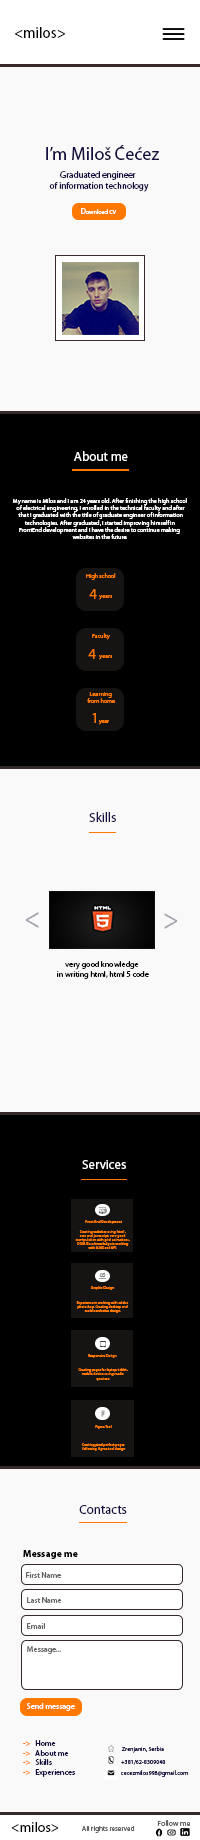
<style>
.page{position:relative;width:200px;height:1840px;background:#f9f9f9}
.page>*{position:absolute;margin:0}
.t1{font:15px "MyriadPro-Regular";color:#000000}
.t2{font:18px "MyriadPro-Regular";color:#130f40}
.t3{font:9px "MyriadPro-Regular";color:#130f40}
.t4{font:6px "MyriadPro-Regular";color:#ffffff}
.t5{font:8px "MyriadPro-Regular";color:#ffffff}
.t6{font:13px "MyriadPro-Regular";color:#ffffff}
.t7{font:6px "MyriadPro-Regular";color:#ff7800}
.t8{font:14px "MyriadPro-Regular";color:#ff7800}
.t9{font:13px "MyriadPro-Regular";color:#130f40}
.t10{font:30.4px "MyriadPro-Regular";color:#a2a1ac;scale:0.88 1}
.t11{font:29.4px "MyriadPro-Regular";color:#a2a1ac;scale:0.91 1}
.t12{font:8px "MyriadPro-Regular";color:#000000}
.t13{font:3.3px "MyriadPro-Regular";color:#ff7800;scale:1.1 1}
.t14{font:3.4px "MyriadPro-Regular";color:#ff7800;scale:1.06 1}
.t15{font:3.5px "MyriadPro-Regular";color:#ff7800}
.t16{font:3.5px "MyriadPro-Regular";color:#ff7800;scale:1.04 1}
.t17{font:10px "MyriadPro-Bold";color:#000000}
.t18{font:8px "MyriadPro-Regular";color:#666666}
.t19{font:8px "MyriadPro-Regular";color:#130f40}
.t20{font:8px "MyriadPro-Regular";color:#ff7800}
.t21{font:6px "MyriadPro-Regular";color:#130f40}
.t22{font:14px "MyriadPro-Regular";color:#000000}
.t23{font:7px "MyriadPro-Regular";color:#666666}
.t24{font:7.3px "MyriadPro-Regular";color:#666666;scale:1.04 1}
</style>
<div class="page">
<p class="t1" style="left:15px;top:27px;width:50px;height:11px">&lt;milos&gt;</p>
<p class="t2" style="left:46px;top:145px;width:113px;height:15px">I’m Miloš Ćećez</p>
<p class="t3" style="left:49px;top:171px;width:100px;height:21px;text-align:center">Graduated engineer <br>of information technology</p>
<p class="t4" style="left:81px;top:208px;width:35px;height:6px"><span class="t5">D</span>ownload CV</p>
<p class="t6" style="left:74px;top:451px;width:54px;height:10px">About me</p>
<p class="t4" style="left:12px;top:498px;width:175px;height:41px;text-align:center">My name is Milos and I am 24 years old. After finishing the high school<br> of electrical engineering, I enrolled in the technical faculty and after<br> that I graduated with the title of graduate engineer of information<br> technologies. After graduated, I started improving himself in <br>FrontEnd development and I have the desire to continue making <br>websites in the future.</p>
<p class="t7" style="left:86px;top:573px;width:30px;height:7px">High school</p>
<p class="t8" style="left:89px;top:589px;width:8px;height:10px">4</p>
<p class="t7" style="left:99px;top:595px;width:14px;height:5px">years</p>
<p class="t7" style="left:92px;top:633px;width:18px;height:7px">Faculty</p>
<p class="t8" style="left:88px;top:649px;width:8px;height:10px">4</p>
<p class="t7" style="left:99px;top:655px;width:14px;height:5px">years</p>
<p class="t7" style="left:87px;top:692px;width:29px;height:11px">Learning <br> from home</p>
<p class="t8" style="left:92px;top:713px;width:4px;height:10px">1</p>
<p class="t7" style="left:99px;top:720px;width:10px;height:5px">year</p>
<p class="t9" style="left:89px;top:812px;width:27px;height:10px">Skills</p>
<p class="t10" style="left:26px;top:912px;width:13px;height:16px">&lt;</p>
<p class="t11" style="left:164px;top:913px;width:13px;height:16px">&gt;</p>
<p class="t12" style="left:57px;top:961px;width:92px;height:18px;text-align:center">very good knowledge<br> in writing html, html 5 code</p>
<p class="t6" style="left:82px;top:1160px;width:44px;height:9px">Services</p>
<p class="t13" style="left:75px;top:1230px;width:55px;height:19px">Creating websites using  html ,<br>scss and  javascript, very good<br>manipulation with grid, animations,<br>DOM. Base knowledge in working<br>with AJAX and API.</p>
<p class="t13" style="left:85px;top:1220px;width:37px;height:4px">Front-End Development</p>
<p class="t14" style="left:90px;top:1286px;width:25px;height:4px">Graphic Design</p>
<p class="t14" style="left:76px;top:1301px;width:53px;height:12px;text-align:center">Experience in working with adobe <br>photoshop. Creating desktop and <br>mobile websites design.</p>
<p class="t15" style="left:88px;top:1354px;width:29px;height:4px">Responsive Design</p>
<p class="t15" style="left:78px;top:1368px;width:50px;height:13px;text-align:center">Creating pages for laptop, tablet,<br> mobile devices using media <br>queries.s</p>
<p class="t16" style="left:95px;top:1425px;width:17px;height:4px">Figma Tool</p>
<p class="t16" style="left:81px;top:1443px;width:45px;height:8px">Creating pixel perfect pages<br> following  figma tool design</p>
<p class="t9" style="left:79px;top:1505px;width:48px;height:9px">Contacts</p>
<p class="t17" style="left:23px;top:1550px;width:55px;height:9px">Message me</p>
<p class="t18" style="left:26px;top:1572px;width:36px;height:6px">First Name</p>
<p class="t18" style="left:27px;top:1597px;width:35px;height:6px">Last Name</p>
<p class="t18" style="left:27px;top:1623px;width:18px;height:6px">Email</p>
<p class="t18" style="left:27px;top:1646px;width:34px;height:8px">Message...</p>
<p class="t5" style="left:27px;top:1703px;width:48px;height:8px">Send message</p>
<p class="t19" style="left:23px;top:1740px;width:53px;height:37px"><span class="t20">-&gt;   </span>Home<br><span class="t20">-&gt;   </span>About me<br><span class="t20">-&gt;   </span>Skills<br><span class="t20">-&gt;   </span>Experiences</p>
<p class="t21" style="left:121px;top:1746px;width:43px;height:7px">Zrenjanin, Serbia</p>
<p class="t21" style="left:121px;top:1760px;width:45px;height:5px">+381/62-8309048</p>
<p class="t21" style="left:120px;top:1770px;width:69px;height:7px">cecezmilos998@gmail.com</p>
<p class="t22" style="left:11px;top:1822px;width:48px;height:10px">&lt;milos&gt;</p>
<p class="t23" style="left:82px;top:1826px;width:53px;height:7px">All rights reserved</p>
<p class="t24" style="left:157px;top:1820px;width:34px;height:6px">Follow me</p>
</div>
